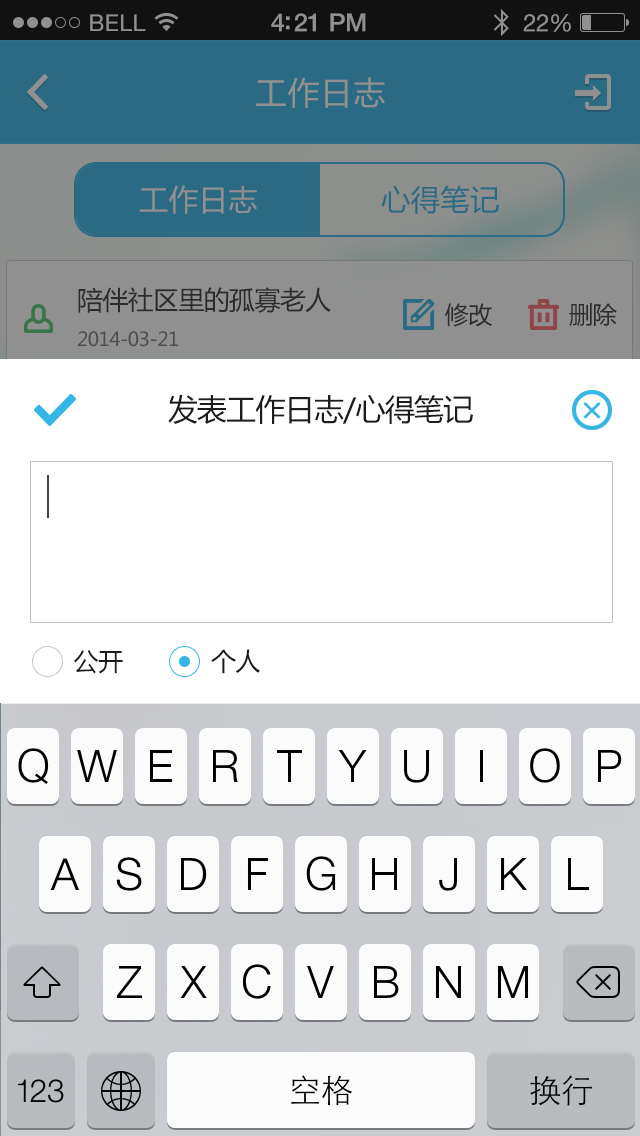
<style>
.page{position:relative;width:640px;height:1136px;background:#ffffff}
.page>*{position:absolute;margin:0}
.t1{font:23px "HelveticaNeue";letter-spacing:0.02em;color:#909090}
.t2{font:25px "HelveticaNeue-Medium";letter-spacing:-0.02em;color:#909090}
.t3{font:24px "HelveticaNeue";letter-spacing:-0.02em;color:#909090}
.t4{font:31.7px "MicrosoftYaHei";letter-spacing:0.025em;color:#909090}
.t5{font:29.2px "MicrosoftYaHei";letter-spacing:0.025em;color:#909090}
.t6{font:29.2px "MicrosoftYaHei";letter-spacing:0.025em;color:#2a6b83}
.t7{font:26px "MicrosoftYaHei";letter-spacing:-0.025em;color:#363636}
.t8{font:23.9px "MicrosoftYaHei";letter-spacing:-0.025em;color:#363636}
.t9{font:19.2px "MicrosoftYaHei";letter-spacing:-0.025em;color:#4d4d4d}
.t10{font:30px "MicrosoftYaHei";letter-spacing:-0.025em;color:#1c1c1c}
.t11{font:25px "MicrosoftYaHei";letter-spacing:-0.025em;color:#1c1c1c}
</style>
<div class="page">
<p class="t1" style="left:90px;top:14px;width:56px;height:17px">BELL</p>
<p class="t2" style="left:271px;top:13px;width:95px;height:19px">4:21 PM</p>
<p class="t3" style="left:523px;top:14px;width:48px;height:18px">22%</p>
<p class="t4" style="left:256px;top:77px;width:129px;height:31px">工作日志</p>
<p class="t5" style="left:139px;top:185px;width:118px;height:29px">工作日志</p>
<p class="t6" style="left:381px;top:185px;width:118px;height:29px">心得笔记</p>
<p class="t7" style="left:78px;top:287px;width:253px;height:26px">陪伴社区里的孤寡老人</p>
<p class="t8" style="left:445px;top:303px;width:48px;height:24px">修改</p>
<p class="t8" style="left:569px;top:303px;width:48px;height:23px">删除</p>
<p class="t9" style="left:78px;top:331px;width:100px;height:16px">2014-03-21</p>
<p class="t10" style="left:168px;top:394px;width:305px;height:30px">发表工作日志/心得笔记</p>
<p class="t11" style="left:73px;top:650px;width:50px;height:24px">公开</p>
<p class="t11" style="left:211px;top:649px;width:49px;height:25px">个人</p>
</div>
